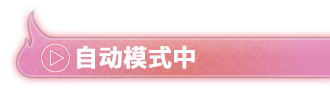
<style>
.page{position:relative;width:330px;height:90px;background:#ffffff}
.page>*{position:absolute;margin:0}
.t1{font:24px "SourceHanSansSC-Bold";color:#ffffff;font-weight:bold}
</style>
<div class="page">
<p class="t1" style="left:77px;top:45px;width:118px;height:24px">自动模式中</p>
</div>
